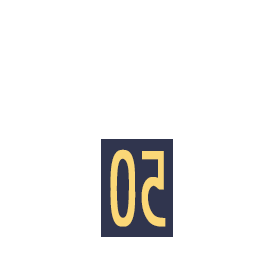
<style>
.page{position:relative;width:256px;height:256px;background:#ffffff}
.page>*{position:absolute;margin:0}
.t1{font:110px "OratorStd";letter-spacing:-0.14em;color:#fbd777;font-weight:bold;scale:0.55 1}
</style>
<div class="page">
<p class="t1" style="left:110px;top:149px;width:56px;height:78px;rotate:180deg">50</p>
</div>
